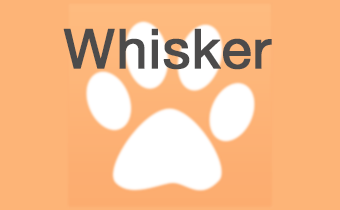
<style>
.page{position:relative;width:340px;height:210px;background:#fdb477}
.page>*{position:absolute;margin:0}
.t1{font:55px "HelveticaNeue";color:#4c4b4b;font-weight:bold}
</style>
<div class="page">
<p class="t1" style="left:63px;top:28px;width:209px;height:42px">Whisker</p>
</div>
